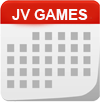
<style>
.page{position:relative;width:100px;height:102px}
.page>*{position:absolute;margin:0}
.t1{font:14.6px "Arial-BoldMT";color:#fafafc}
</style>
<div class="page">
<p class="t1" style="left:12px;top:9px;width:76px;height:11px">JV GAMES</p>
</div>
